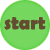
<style>
.page{position:relative;width:50px;height:50px;background:#77d860}
.page>*{position:absolute;margin:0}
.t1{font:18.7px "BerlinSansFBDemi-Bold";color:#644c32;font-weight:bold}
</style>
<div class="page">
<p class="t1" style="left:4px;top:17px;width:42px;height:13px">start</p>
</div>
